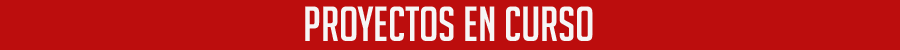
<style>
.page{position:relative;width:900px;height:50px;background:#bc0d0d}
.page>*{position:absolute;margin:0}
.t1{font:48px "BigNoodleTitling";color:#f6f6f6}
</style>
<div class="page">
<p class="t1" style="left:305px;top:6px;width:288px;height:35px">proyectos en curso</p>
</div>
